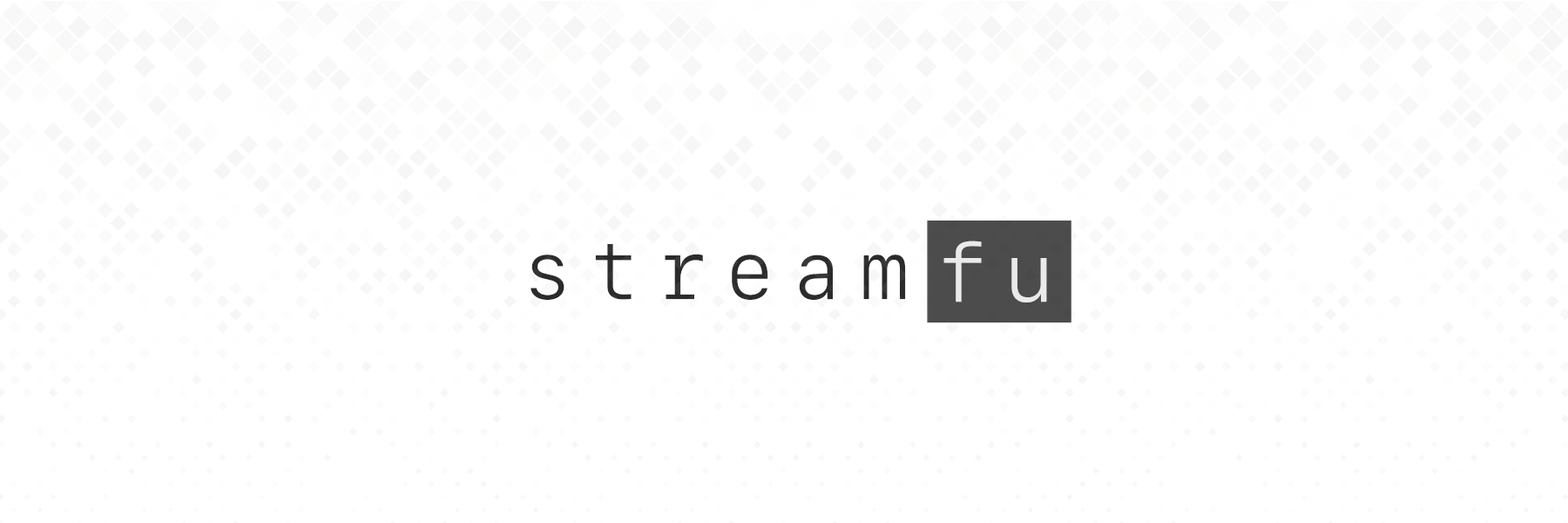
<style>
.page{position:relative;width:1568px;height:523px;background:#ffffff}
.page>*{position:absolute;margin:0}
.t1{font:82.6px "SFMono-Light";letter-spacing:0.2em;color:#2b2b2b}
.t2{font:82.6px "SFMono-Light";letter-spacing:0.2em;color:#ffffff}
</style>
<div class="page">
<p class="t1" style="left:531px;top:244px;width:375px;height:56px">stream</p>
<p class="t2" style="left:943px;top:240px;width:104px;height:62px;opacity:0.83">fu</p>
</div>
